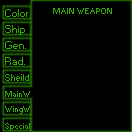
<style>
.page{position:relative;width:132px;height:132px;background:#000000}
.page>*{position:absolute;margin:0}
.t1{font:10px "Small Fonts";color:#31af00}
.t2{font:8px "Small Fonts";color:#31af00}
.t3{font:9px "Small Fonts";color:#31af00}
</style>
<div class="page">
<p class="t1" style="left:5px;top:9px;width:23px;height:8px">Color</p>
<p class="t2" style="left:53px;top:8px;width:59px;height:6px">MAIN WEAPON</p>
<p class="t1" style="left:5px;top:25px;width:20px;height:10px">Ship</p>
<p class="t1" style="left:5px;top:41px;width:21px;height:8px">Gen.</p>
<p class="t1" style="left:5px;top:57px;width:20px;height:8px">Rad.</p>
<p class="t3" style="left:5px;top:74px;width:24px;height:7px">Sheild</p>
<p class="t2" style="left:5px;top:91px;width:25px;height:6px">MainW</p>
<p class="t2" style="left:5px;top:123px;width:25px;height:8px">Special</p>
</div>
